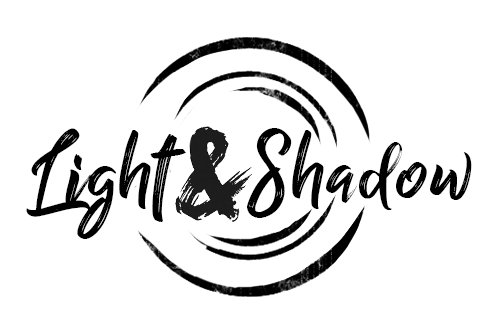
<style>
.page{position:relative;width:500px;height:332px;background:#ffffff}
.page>*{position:absolute;margin:0}
.t1{font:100px "BillyOhio";letter-spacing:0.025em;color:#000000}
</style>
<div class="page">
<p class="t1" style="left:26px;top:128px;width:161px;height:111px">Light</p>
<p class="t1" style="left:247px;top:128px;width:225px;height:90px">Shadow</p>
</div>
